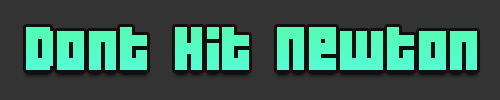
<style>
.page{position:relative;width:500px;height:100px;background:#333333}
.page>*{position:absolute;margin:0}
.t1{font:55px "04b19";color:#55fcc3}
</style>
<div class="page">
<p class="t1" style="left:26px;top:27px;width:451px;height:43px">Dont Hit Newton</p>
</div>
